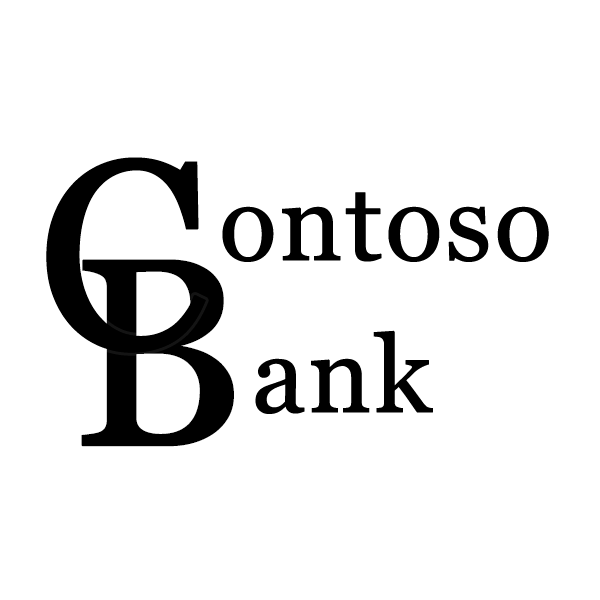
<style>
.page{position:relative;width:600px;height:600px;background:#ffffff}
.page>*{position:absolute;margin:0}
.t1{font:266.6px "Georgia";color:#000000;font-weight:bold}
.t2{font:106.7px "Georgia";color:#000000;font-weight:bold}
</style>
<div class="page">
<p class="t1" style="left:46px;top:157px;width:160px;height:196px">C</p>
<p class="t2" style="left:222px;top:192px;width:327px;height:70px">ontoso</p>
<p class="t1" style="left:81px;top:259px;width:153px;height:188px">B</p>
<p class="t2" style="left:255px;top:330px;width:178px;height:84px">ank</p>
</div>
